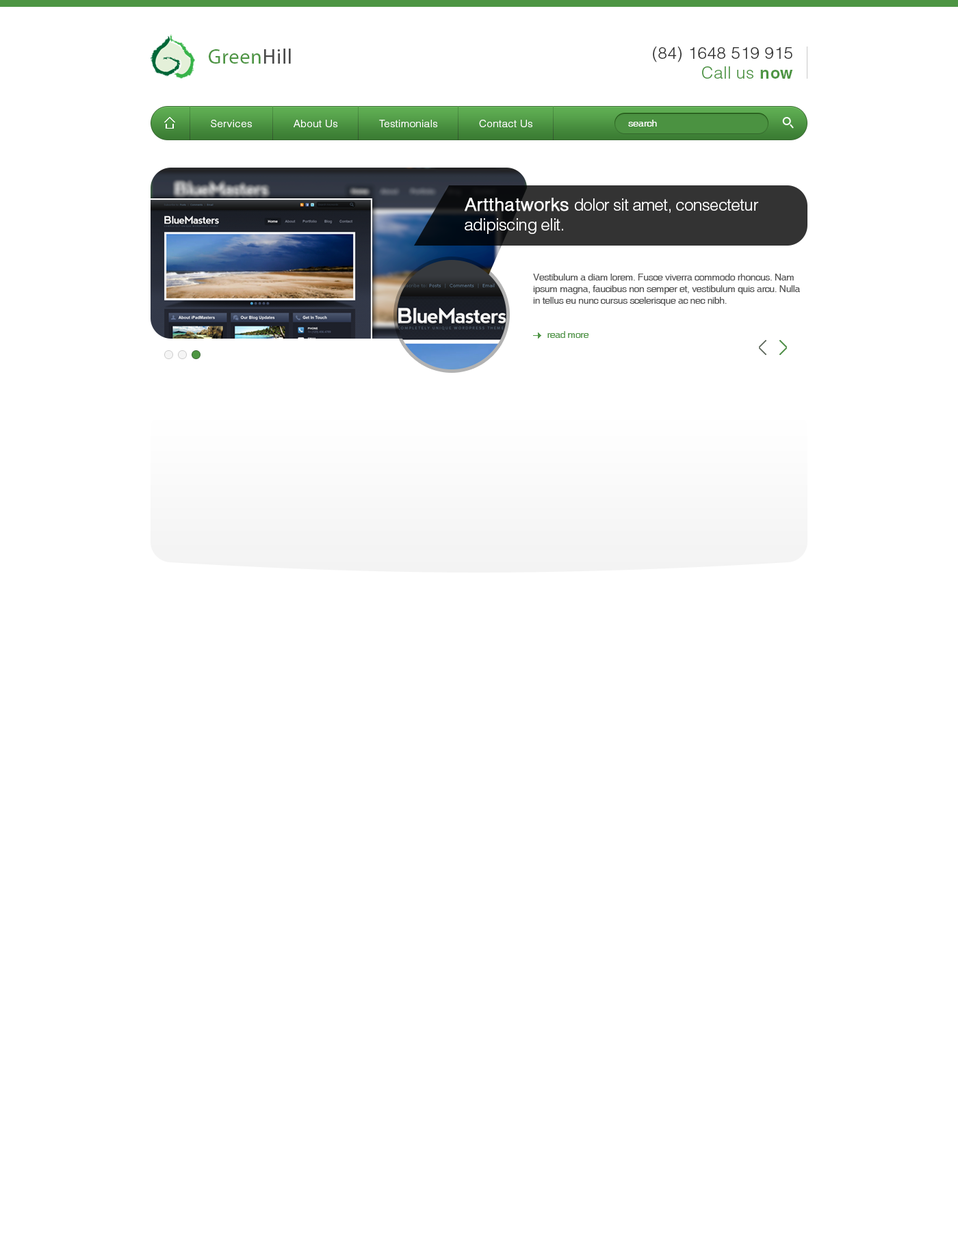
<style>
.page{position:relative;width:958px;height:1245px;background:#ffffff}
.page>*{position:absolute;margin:0}
.t1{font:20.5px "MyriadPro-Regular";letter-spacing:0.025em;color:#4d9543}
.t2{font:20.5px "MyriadPro-Regular";letter-spacing:0.025em;color:#4a4a4a}
.t3{font:16.4px "HelveticaLTStd-Light";letter-spacing:0.025em;color:#333333}
.t4{font:16.4px "HelveticaLTStd-Light";letter-spacing:0.025em;color:#4d9543}
.t5{font:16.4px "HelveticaLTStd-Bold";letter-spacing:0.025em;color:#4d9543}
.t6{font:10.3px "HelveticaLTStd-Light";letter-spacing:0.025em;color:#ffffff}
.t7{font:9.6px "Helvetica";color:#ffffff}
.t8{font:16.4px "HelveticaLTStd-Light";letter-spacing:-0.025em;color:#ffffff}
.t9{font:17.8px "HelveticaLTStd-Light";color:#ffffff;font-weight:bold}
.t10{font:9.6px "Helvetica";letter-spacing:-0.025em;color:#555555}
.t11{font:9.6px "Helvetica";letter-spacing:-0.025em;color:#509647}
</style>
<div class="page">
<p class="t1" style="left:209px;top:49px;width:82px;height:15px">Green<span class="t2">Hill</span></p>
<p class="t3" style="left:653px;top:47px;width:140px;height:32px;text-align:right">(84) 1648 519 915<br><span class="t4">Call us </span><span class="t5">now</span></p>
<p class="t6" style="left:211px;top:120px;width:41px;height:7px">Services</p>
<p class="t6" style="left:293px;top:120px;width:45px;height:7px">About Us</p>
<p class="t6" style="left:379px;top:120px;width:59px;height:7px">Testimonials</p>
<p class="t6" style="left:479px;top:120px;width:53px;height:7px">Contact Us</p>
<p class="t7" style="left:628px;top:120px;width:29px;height:7px">search</p>
<p class="t8" style="left:465px;top:198px;width:294px;height:36px"><span class="t9">Artthatworks </span>dolor sit amet, consectetur <br>adipiscing elit.</p>
<p class="t10" style="left:533px;top:274px;width:267px;height:32px">Vestibulum a diam lorem. Fusce viverra commodo rhoncus. Nam ipsum magna, faucibus non semper et, vestibulum quis arcu. Nulla in tellus eu nunc cursus scelerisque ac nec nibh.</p>
<p class="t11" style="left:547px;top:331px;width:42px;height:7px">read more</p>
</div>
